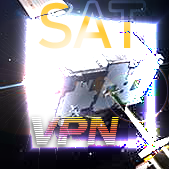
<style>
.page{position:relative;width:169px;height:169px;background:#ffffff}
.page>*{position:absolute;margin:0}
.t1{font:63px "Bahnschrift"}
.t2{font:43px "LinearBeam05"}
</style>
<div class="page">
<p class="t1" style="left:38px;top:2px;width:105px;height:47px">SAT</p>
<p class="t2" style="left:31px;top:117px;width:88px;height:28px">VPN</p>
</div>
